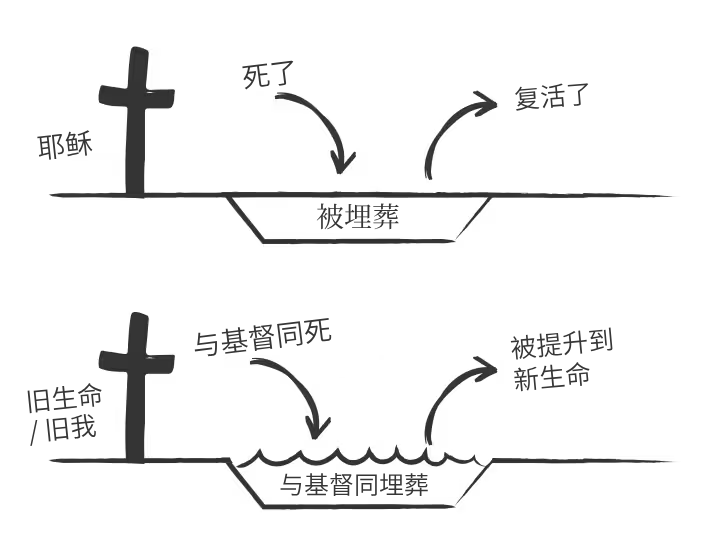
<style>
.page{position:relative;width:708px;height:555px;background:#ffffff}
.page>*{position:absolute;margin:0}
.t1{font:28px "SourceHanSansTC-Normal";color:#363636}
.t2{font:26px "SourceHanSansTC-Normal";color:#363636}
.t3{font:28px "SourceHanSerif-Regular";color:#363636}
.t4{font:26px/32px "SourceHanSansTC-Normal";color:#363636}
.t5{font:26px/30px "SourceHanSansTC-Normal";color:#363636}
.t6{font:25px "SourceHanSansTC-Normal";color:#363636}
</style>
<div class="page">
<p class="t1" style="left:242px;top:60px;width:52px;height:30px;rotate:-7deg">死了</p>
<p class="t2" style="left:515px;top:83px;width:74px;height:28px;rotate:-5deg">复活了</p>
<p class="t1" style="left:37px;top:130px;width:56px;height:30px;rotate:-6deg">耶稣</p>
<p class="t3" style="left:316px;top:203px;width:83px;height:27px">被埋葬</p>
<p class="t1" style="left:194px;top:317px;width:138px;height:40px;rotate:-7deg">与基督同死</p>
<p class="t4" style="left:510px;top:327px;width:103px;height:65px;rotate:-5deg">被提升到<br>新生命</p>
<p class="t5" style="left:27px;top:383px;width:75px;height:63px;rotate:-6deg">旧生命 <br>/ 旧我</p>
<p class="t6" style="left:280px;top:473px;width:148px;height:23px">与基督同埋葬</p>
</div>
